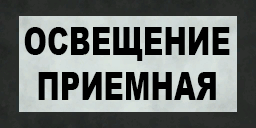
<style>
.page{position:relative;width:256px;height:128px}
.page>*{position:absolute;margin:0}
.t1{font:38px/45px "Arial-Black";color:#000000;scale:0.74 1}
</style>
<div class="page">
<p class="t1" style="left:24px;top:27px;width:206px;height:73px;text-align:center">ОСВЕЩЕНИЕ<br>ПРИЕМНАЯ</p>
</div>
